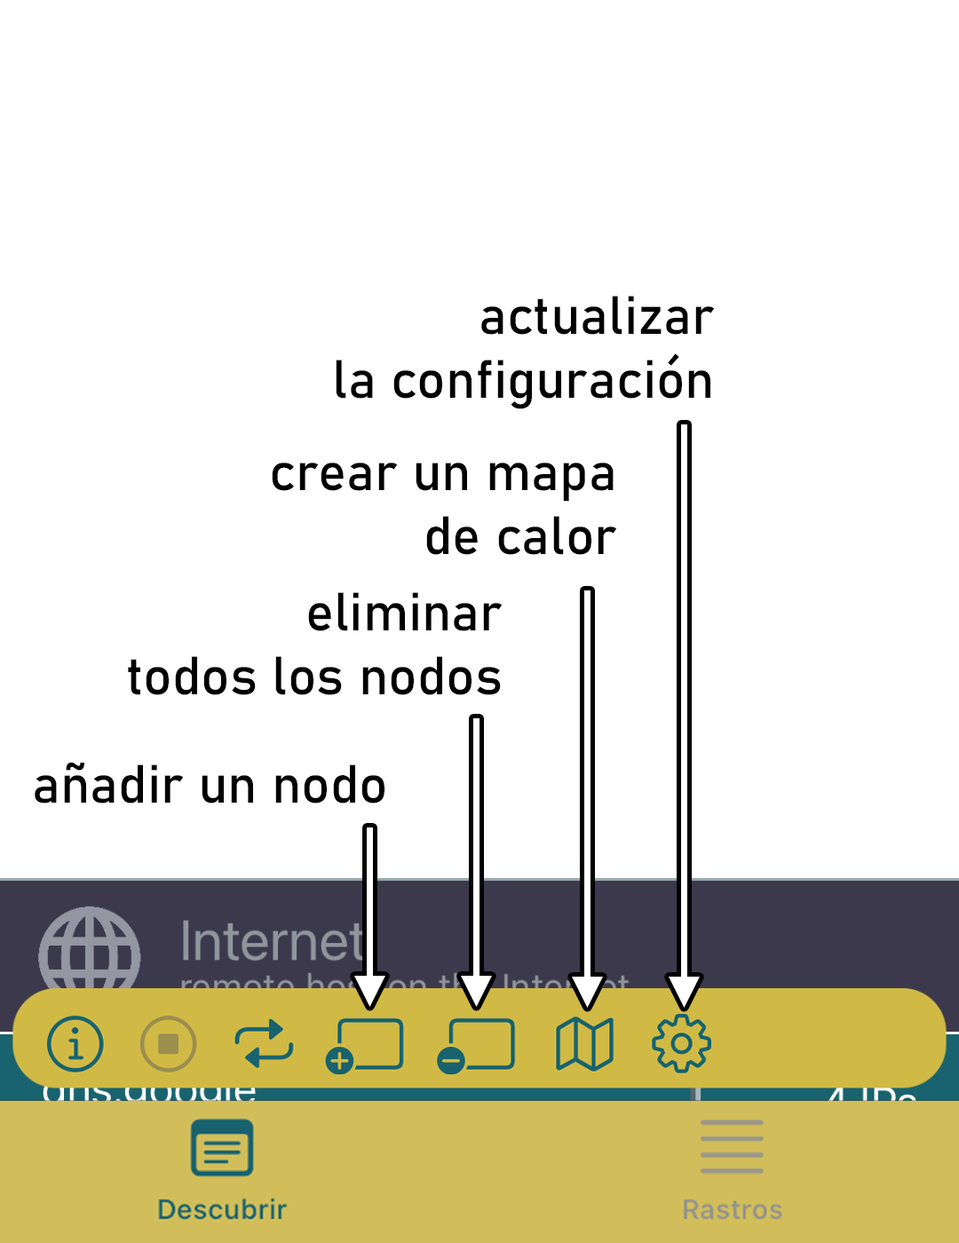
<style>
.page{position:relative;width:959px;height:1243px;background:#ffffff}
.page>*{position:absolute;margin:0}
.t1{font:53.3px "Bahnschrift";color:#000000}
</style>
<div class="page">
<p class="t1" style="left:336px;top:296px;width:379px;height:113px;text-align:right">actualizar<br>la configuración</p>
<p class="t1" style="left:272px;top:463px;width:345px;height:92px;text-align:right">crear un mapa<br>de calor</p>
<p class="t1" style="left:128px;top:592px;width:375px;height:103px;text-align:right">eliminar<br>todos los nodos</p>
<p class="t1" style="left:35px;top:762px;width:350px;height:42px">añadir un nodo</p>
</div>
